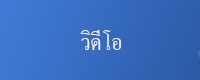
<style>
.page{position:relative;width:200px;height:80px}
.page>*{position:absolute;margin:0}
.t1{font:30.1px "AngsanaNew";color:#f0f0f7;scale:0.94 1}
</style>
<div class="page">
<p class="t1" style="left:80px;top:30px;width:41px;height:20px">วิดีโอ</p>
</div>
